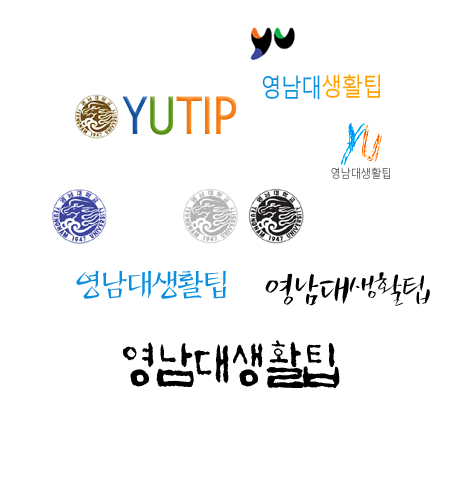
<style>
.page{position:relative;width:454px;height:500px;background:#ffffff}
.page>*{position:absolute;margin:0}
.t1{font:25.2px "MalgunGothicRegular";letter-spacing:-0.05em;color:#0c8fde;scale:0.86 1}
.t2{font:25.2px "MalgunGothicRegular";letter-spacing:-0.05em;color:#ffa200;scale:0.86 1}
.t3{font:52.5px "TrebuchetMS";letter-spacing:-0.01em;color:#f97e12;scale:0.86 1}
.t4{font:52.5px "TrebuchetMS";letter-spacing:-0.01em;color:#1154a2;scale:0.86 1}
.t5{font:52.5px "TrebuchetMS";letter-spacing:-0.01em;color:#5b9415;scale:0.86 1}
.t6{font:50.4px "NailScratch";letter-spacing:-0.05em;color:#008cff;scale:0.86 1}
.t7{font:12px "MalgunGothicRegular";letter-spacing:-0.05em;color:#666666;scale:0.9 1}
.t8{font:31.5px "HYmprL";letter-spacing:-0.05em;color:#0c8fde;scale:0.86 1}
.t9{font:37.8px "SanDaL";letter-spacing:-0.05em;color:#000000;scale:0.86 1}
.t10{font:50.4px "YDIDanL";letter-spacing:-0.05em;color:#000000;scale:0.86 1}
</style>
<div class="page">
<p class="t1" style="left:262px;top:75px;width:58px;height:25px">영남대</p>
<p class="t2" style="left:322px;top:74px;width:58px;height:24px">생활팁</p>
<p class="t3" style="left:122px;top:96px;width:115px;height:39px"><span class="t4">Y</span><span class="t5">U</span>TIP</p>
<p class="t6" style="left:341px;top:122px;width:41px;height:43px">yu</p>
<p class="t6" style="left:341px;top:122px;width:41px;height:43px">yu</p>
<p class="t6" style="left:341px;top:122px;width:41px;height:43px">yu</p>
<p class="t7" style="left:331px;top:167px;width:59px;height:12px;opacity:0.78">영남대생활팁</p>
<p class="t8" style="left:76px;top:270px;width:150px;height:29px">영남대생활팁</p>
<p class="t9" style="left:265px;top:272px;width:165px;height:34px">영남대생활팁</p>
<p class="t10" style="left:123px;top:340px;width:217px;height:48px">영남대생활팁</p>
</div>
